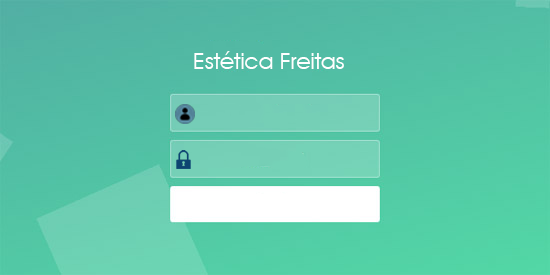
<style>
.page{position:relative;width:550px;height:275px}
.page>*{position:absolute;margin:0}
.t1{font:23.2px "AvantGardeITCbyBT-Book";color:#ffffff}
</style>
<div class="page">
<p class="t1" style="left:194px;top:51px;width:150px;height:18px">Estética Freitas</p>
</div>
